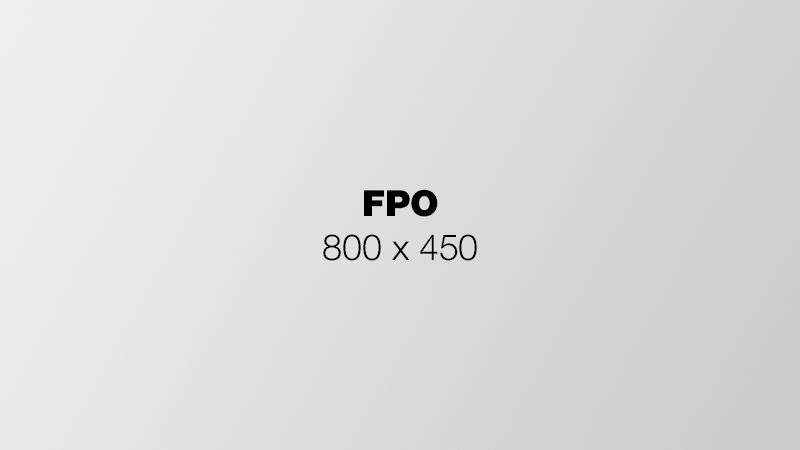
<style>
.page{position:relative;width:800px;height:450px}
.page>*{position:absolute;margin:0}
.t1{font:36px/24px "HelveticaNeueLTPro-Lt";color:#000000}
.t2{font:36px/24px "HelveticaNeueLTPro-Blk";color:#000000}
</style>
<div class="page">
<p class="t1" style="left:323px;top:189px;width:154px;height:72px;text-align:center"><span class="t2">FPO<br></span>800 x 450</p>
</div>
